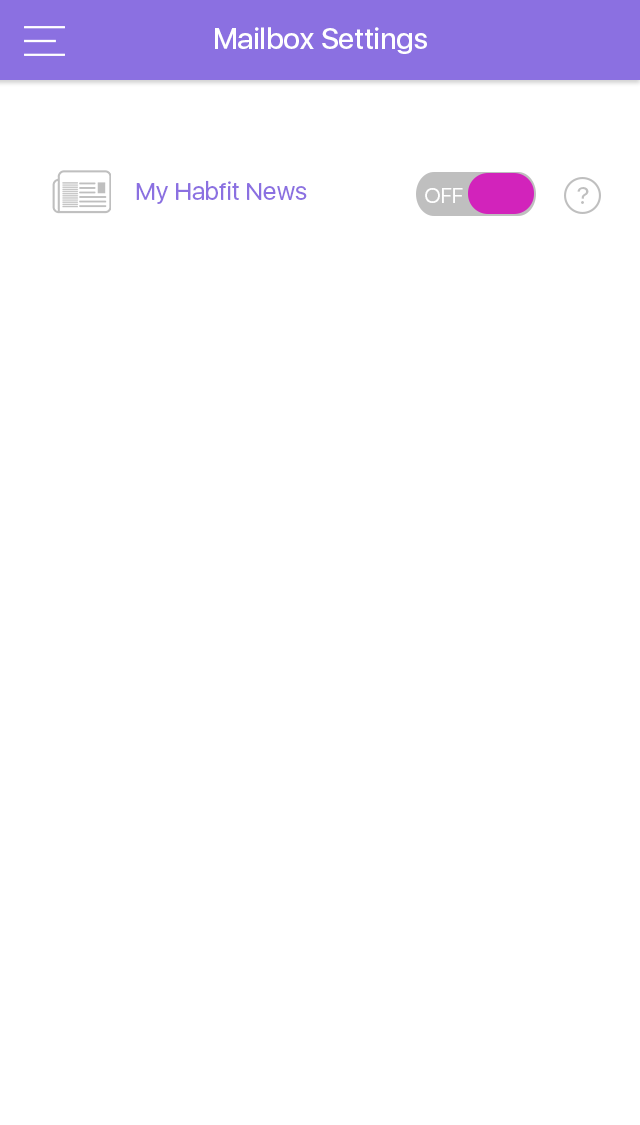
<style>
.page{position:relative;width:640px;height:1125px;background:#ffffff}
.page>*{position:absolute;margin:0}
.t1{font:29.2px "SFUIDisplay-Medium";color:#ffffff}
.t2{font:25px "SFUIDisplay-Regular";color:#8b70e1}
.t3{font:21.8px "SFUIDisplay-Regular";color:#ffffff}
.t4{font:12px "SFUIDisplay-Regular";color:#bfbfbf}
</style>
<div class="page">
<p class="t1" style="left:215px;top:27px;width:212px;height:27px">Mailbox Settings</p>
<p class="t2" style="left:136px;top:180px;width:171px;height:24px">My Habfit News</p>
<p class="t3" style="left:425px;top:188px;width:38px;height:15px">OFF</p>
<p class="t4" style="left:577px;top:187px;width:12px;height:17px">?</p>
</div>
